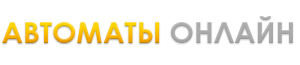
<style>
.page{position:relative;width:300px;height:65px;background:#ffffff}
.page>*{position:absolute;margin:0}
.t1{font:29.2px "CenturyGothic-Bold";color:#ababab}
.t2{font:29.2px "CenturyGothic-Bold"}
</style>
<div class="page">
<p class="t1" style="left:170px;top:16px;width:123px;height:27px">ОНЛАЙН</p>
<p class="t2" style="left:2px;top:22px;width:158px;height:21px">АВТОМАТЫ</p>
</div>
